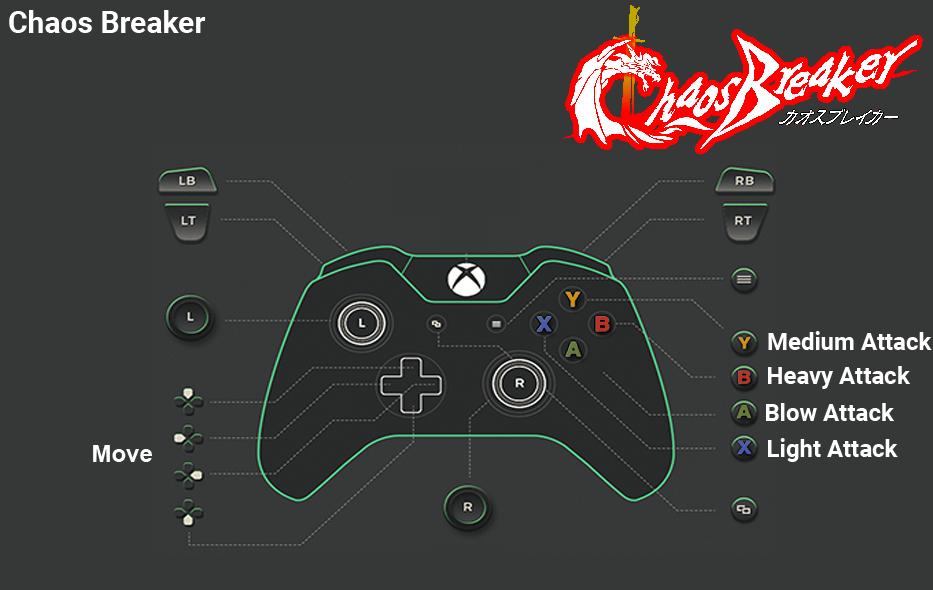
<style>
.page{position:relative;width:933px;height:590px;background:#363838}
.page>*{position:absolute;margin:0}
.t1{font:30px "Roboto-Bold";color:#ffffff}
.t2{font:24px "Roboto-Bold";color:#ffffff}
.t3{font:24px "Arial-BoldMT";color:#fefefe}
</style>
<div class="page">
<p class="t1" style="left:9px;top:10px;width:197px;height:23px">Chaos Breaker</p>
<p class="t2" style="left:768px;top:331px;width:164px;height:19px">Medium Attack</p>
<p class="t2" style="left:768px;top:366px;width:143px;height:23px">Heavy Attack</p>
<p class="t2" style="left:766px;top:403px;width:129px;height:18px">Blow Attack</p>
<p class="t2" style="left:768px;top:438px;width:130px;height:24px">Light Attack</p>
<p class="t3" style="left:93px;top:445px;width:59px;height:17px">Move</p>
</div>
